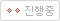
<style>
.page{position:relative;width:60px;height:21px;background:#ffffff}
.page>*{position:absolute;margin:0}
.t1{font:12px "morris9";color:#b3b3b3}
</style>
<div class="page">
<p class="t1" style="left:25px;top:6px;width:29px;height:10px">진행중</p>
</div>
